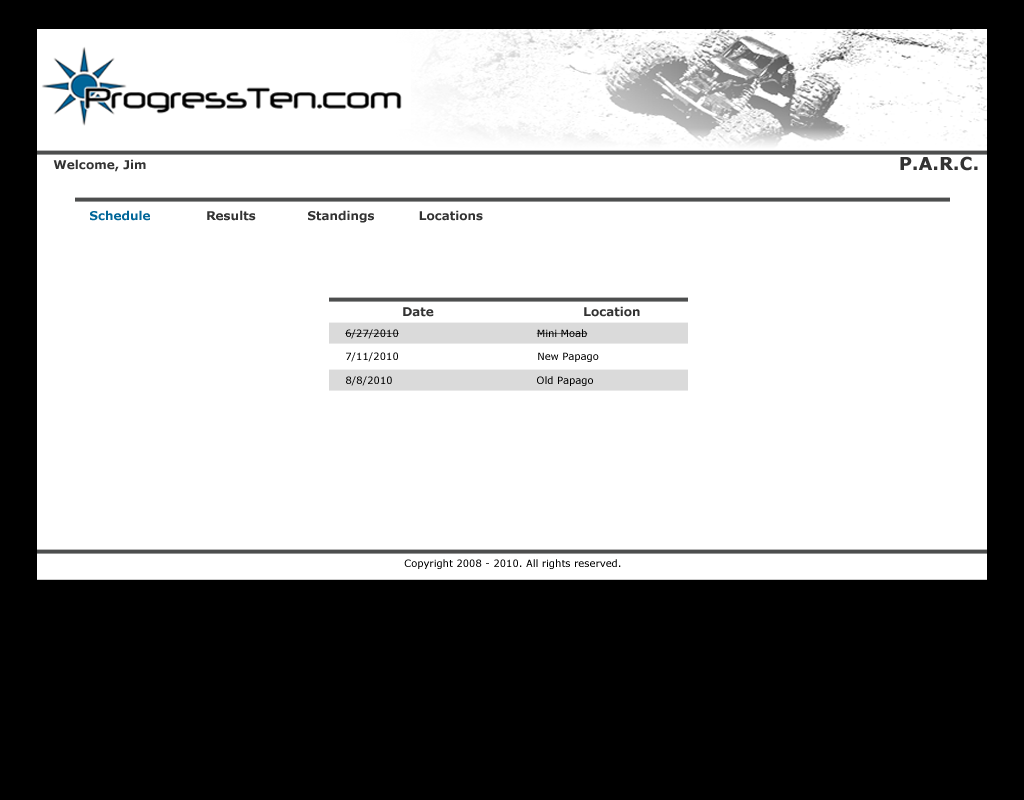
<style>
.page{position:relative;width:1024px;height:800px;background:#ffffff}
.page>*{position:absolute;margin:0}
.t1{font:12px "Verdana-Bold";color:#333333}
.t2{font:18px "Verdana-Bold";color:#333333}
.t3{font:12px "Verdana-Bold";color:#006699}
.t4{font:10px "Verdana";color:#000000}
</style>
<div class="page">
<p class="t1" style="left:53px;top:159px;width:93px;height:13px">Welcome, Jim</p>
<p class="t2" style="left:900px;top:156px;width:78px;height:15px">P.A.R.C.</p>
<p class="t3" style="left:90px;top:210px;width:60px;height:11px">Schedule</p>
<p class="t1" style="left:207px;top:210px;width:49px;height:11px">Results</p>
<p class="t1" style="left:308px;top:210px;width:66px;height:13px">Standings</p>
<p class="t1" style="left:419px;top:210px;width:64px;height:11px">Locations</p>
<p class="t1" style="left:403px;top:307px;width:31px;height:10px">Date</p>
<p class="t1" style="left:584px;top:306px;width:56px;height:11px">Location</p>
<p class="t4" style="left:345px;top:329px;width:54px;height:10px">6/27/2010</p>
<p class="t4" style="left:536px;top:329px;width:52px;height:8px">Mini Moab</p>
<p class="t4" style="left:346px;top:352px;width:52px;height:10px">7/11/2010</p>
<p class="t4" style="left:538px;top:352px;width:61px;height:10px">New Papago</p>
<p class="t4" style="left:346px;top:376px;width:46px;height:10px">8/8/2010</p>
<p class="t4" style="left:537px;top:376px;width:56px;height:10px">Old Papago</p>
<p class="t4" style="left:404px;top:559px;width:217px;height:10px">Copyright 2008 - 2010. All rights reserved.</p>
</div>
